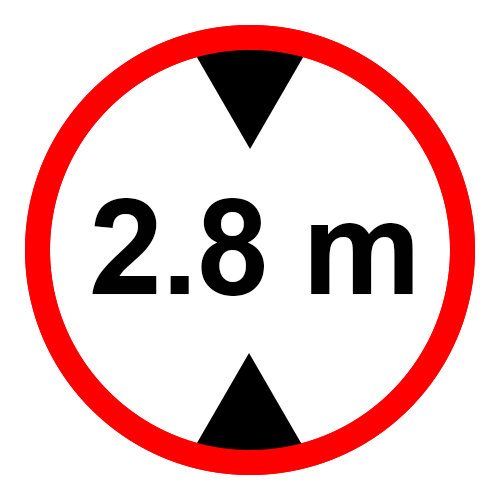
<style>
.page{position:relative;width:500px;height:500px;background:#ffffff}
.page>*{position:absolute;margin:0}
.t1{font:133.3px "Arial-BoldMT";letter-spacing:-0.015em;color:#010101}
</style>
<div class="page">
<p class="t1" style="left:92px;top:198px;width:321px;height:98px">2.8 m</p>
</div>
